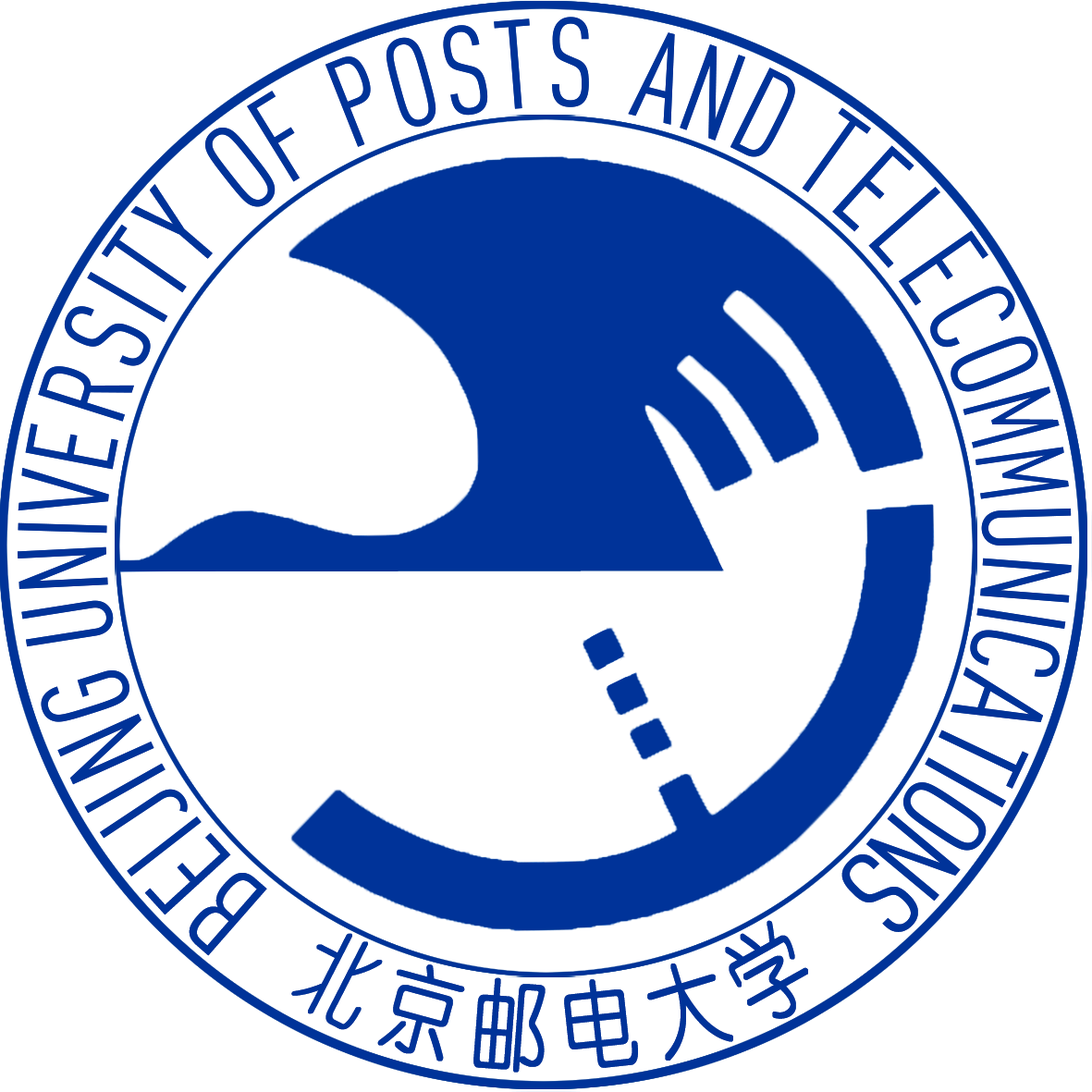
<style>
.page{position:relative;width:1092px;height:1092px;background:#ffffff}
.page>*{position:absolute;margin:0}
.t1{font:124.3px/70.3px "DINCond-Regular";letter-spacing:0.005em;color:#003399;scale:0.95 1}
.t2{font:124.3px/70.3px "DINCond-Regular";letter-spacing:-0.015em;color:#003399;scale:0.95 1}
.t3{font:124.3px/70.3px "DINCond-Regular";letter-spacing:0.05em;color:#003399;scale:0.95 1}
.t4{font:124.3px/70.3px "DINCond-Regular";letter-spacing:0.03em;color:#003399;scale:0.95 1}
.t5{font:124.3px/70.3px "DINCond-Regular";letter-spacing:0.002em;color:#003399;scale:0.95 1}
.t6{font:124.3px/70.3px "DINCond-Regular";letter-spacing:0.025em;color:#003399;scale:0.95 1}
.t7{font:124.3px/70.3px "DINCond-Regular";letter-spacing:0.004em;color:#003399;scale:0.95 1}
.t8{font:124.3px/70.3px "DINCond-Regular";letter-spacing:0.055em;color:#003399;scale:0.95 1}
.t9{font:124.3px/70.3px "DINCond-Regular";letter-spacing:-0.005em;color:#003399;scale:0.95 1}
.t10{font:124.3px/70.3px "DINCond-Regular";letter-spacing:-0.01em;color:#003399;scale:0.76 1}
.t11{font:124.3px/70.3px "DINCond-Regular";letter-spacing:-0.03em;color:#003399;scale:0.95 1}
.t12{font:124.3px/70.3px "DINCond-Regular";letter-spacing:0.01em;color:#003399;scale:0.95 1}
.t13{font:124.3px/70.3px "DINCond-Regular";letter-spacing:0.01em;color:#003399}
.t14{font:124.3px/70.3px "DINCond-Regular";letter-spacing:-0.03em;color:#003399}
.t15{font:124.3px/70.3px "DINCond-Regular";letter-spacing:-0.07em;color:#003399}
.t16{font:97.7px "YouYuan";letter-spacing:0.24em;color:#003399;font-weight:bold;scale:0.77 1}
</style>
<div class="page">
<p class="t1" style="left:17px;top:17px;width:1056px;height:939px">BEIJING <span class="t2">UNIV</span><span class="t3">ER</span><span class="t4">SITY  </span><span class="t5">OF </span><span class="t6">POST </span><span class="t7">S  </span>AND <span class="t8">TELE</span><span class="t9">CO</span><span class="t10">MM</span><span class="t11">UNI</span><span class="t12">C</span><span class="t13">A</span><span class="t14">TI</span><span class="t15">ONS</span></p>
<p class="t16" style="left:291px;top:920px;width:517px;height:153px">北京邮电大学</p>
</div>
